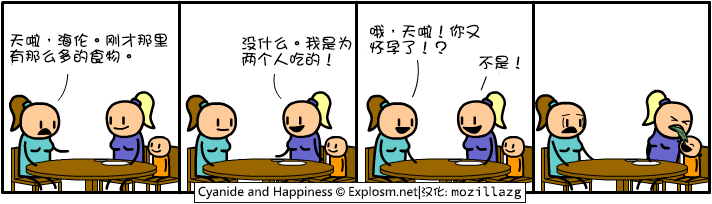
<style>
.page{position:relative;width:712px;height:204px;background:#ffffff}
.page>*{position:absolute;margin:0}
.t1{font:16px/16px "DFGirl";color:#000000}
.t2{font:16px "DFGirl";color:#000000}
</style>
<div class="page">
<p class="t1" style="left:370px;top:24px;width:110px;height:31px">哦，天啦！你又<br>怀孕了！？</p>
<p class="t1" style="left:10px;top:33px;width:158px;height:31px">天啦，海伦。刚才那里<br>有那么多的食物。</p>
<p class="t1" style="left:242px;top:36px;width:110px;height:31px">没什么。我是为<br>两个人吃的！</p>
<p class="t2" style="left:479px;top:55px;width:41px;height:15px">不是！</p>
</div>
